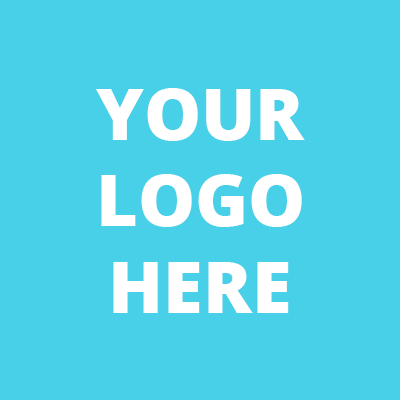
<style>
.page{position:relative;width:400px;height:400px;background:#48d0e8}
.page>*{position:absolute;margin:0}
.t1{font:72px "OpenSans-Extrabold";color:#ffffff}
</style>
<div class="page">
<p class="t1" style="left:96px;top:88px;width:209px;height:225px;text-align:center">YOUR<br>LOGO<br>HERE</p>
</div>
